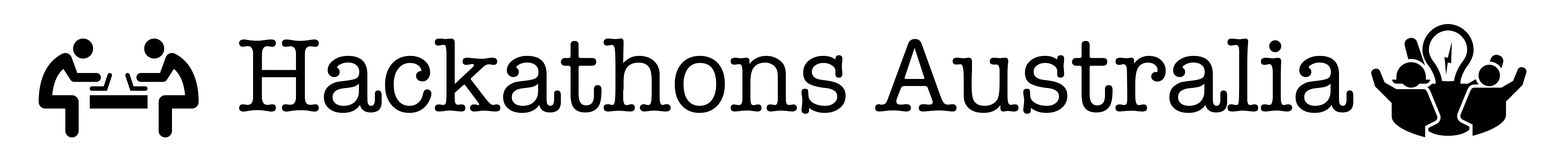
<style>
.page{position:relative;width:1568px;height:160px;background:#ffffff}
.page>*{position:absolute;margin:0}
.t1{font:106.7px "AmericanTypewriter";color:#000000}
</style>
<div class="page">
<p class="t1" style="left:239px;top:38px;width:1114px;height:76px">Hackathons Australia</p>
</div>
